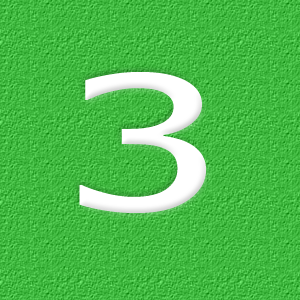
<style>
.page{position:relative;width:300px;height:300px}
.page>*{position:absolute;margin:0}
.t1{font:186px "Tahoma";color:#ffffff;scale:1.54 1}
</style>
<div class="page">
<p class="t1" style="left:79px;top:72px;width:127px;height:141px">3</p>
</div>
